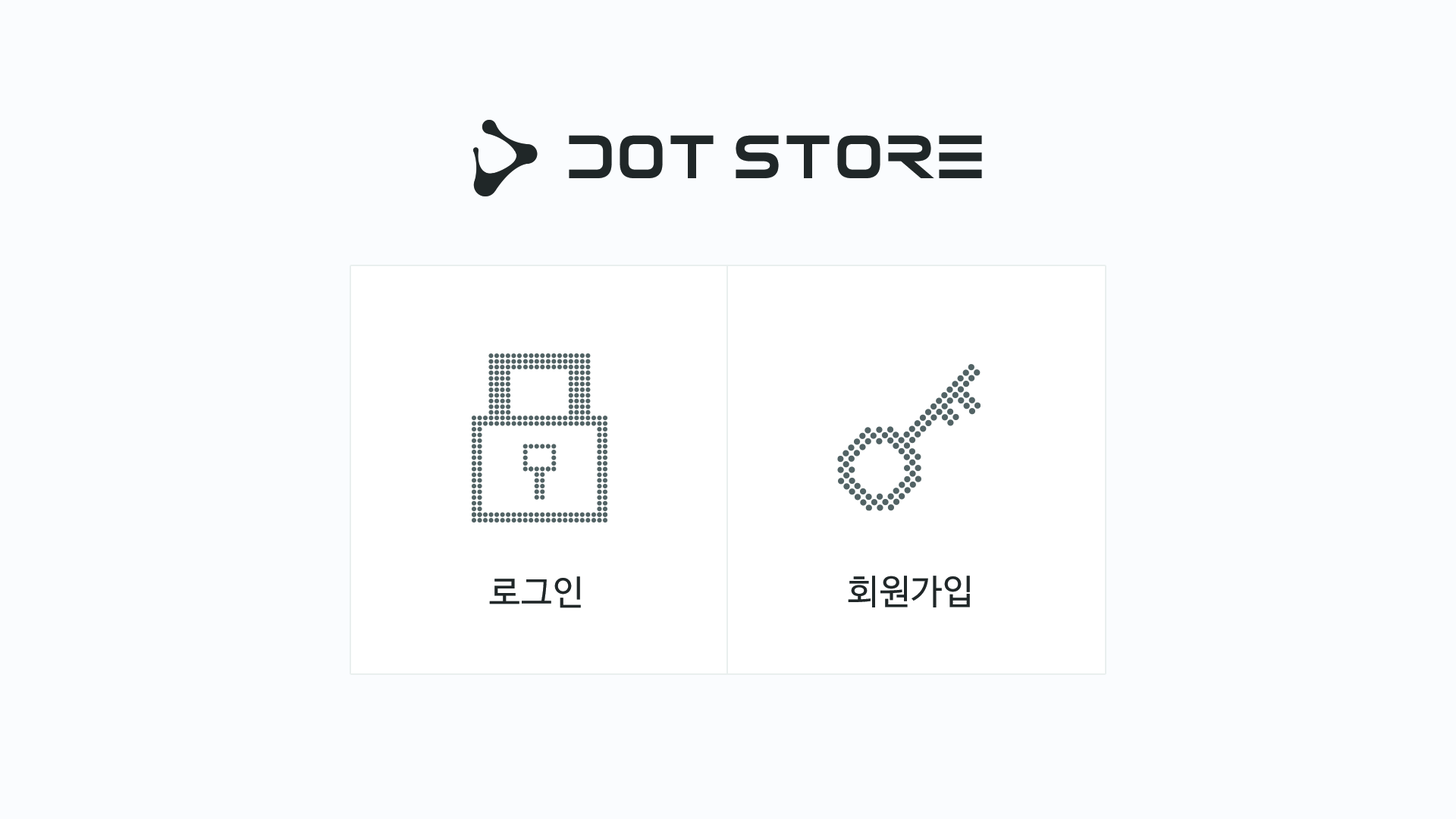
<style>
.page{position:relative;width:1456px;height:819px;background:#fafcfe}
.page>*{position:absolute;margin:0}
.t1{font:34.6px "NanumBarunGothic";letter-spacing:0.025em;color:#202728}
</style>
<div class="page">
<p class="t1" style="left:489px;top:576px;width:92px;height:32px">로그인</p>
<p class="t1" style="left:848px;top:576px;width:122px;height:31px">회원가입</p>
</div>
